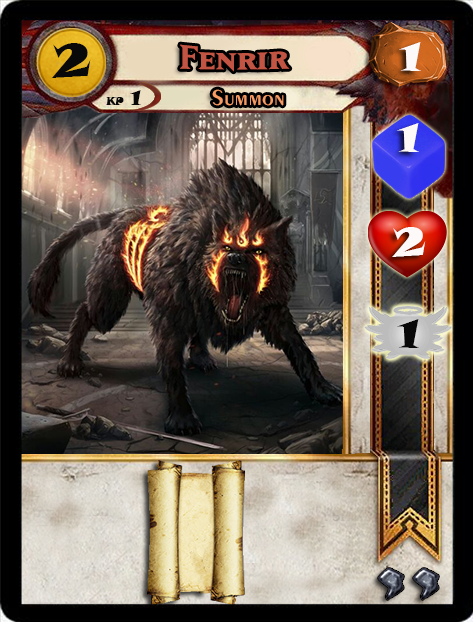
<style>
.page{position:relative;width:473px;height:622px}
.page>*{position:absolute;margin:0}
.t1{font:46.6px "SnapITC-Regular";color:#090909;scale:1.05 1}
.t2{font:40px "MatrixBoldSmallCaps";color:#c25443;scale:1.06 1}
.t3{font:40px "SnapITC-Regular";color:#fef9f9;scale:1.05 1}
.t4{font:22.7px "Exotic350BT-DemiBold";color:#f89c64;scale:1.06 1}
.t5{font:20.5px "SnapITC-Regular";color:#090909}
.t6{font:40px "SnapITC-Regular";color:#090909;scale:1.05 1}
</style>
<div class="page">
<p class="t1" style="left:51px;top:43px;width:40px;height:35px">2</p>
<p class="t2" style="left:180px;top:44px;width:110px;height:28px">Fenrir</p>
<p class="t3" style="left:399px;top:42px;width:22px;height:29px">1</p>
<p class="t4" style="left:212px;top:89px;width:72px;height:17px">Summon</p>
<p class="t5" style="left:130px;top:90px;width:11px;height:15px">1</p>
<p class="t3" style="left:397px;top:123px;width:22px;height:29px">1</p>
<p class="t3" style="left:392px;top:227px;width:34px;height:30px">2</p>
<p class="t6" style="left:397px;top:319px;width:22px;height:29px">1</p>
</div>
